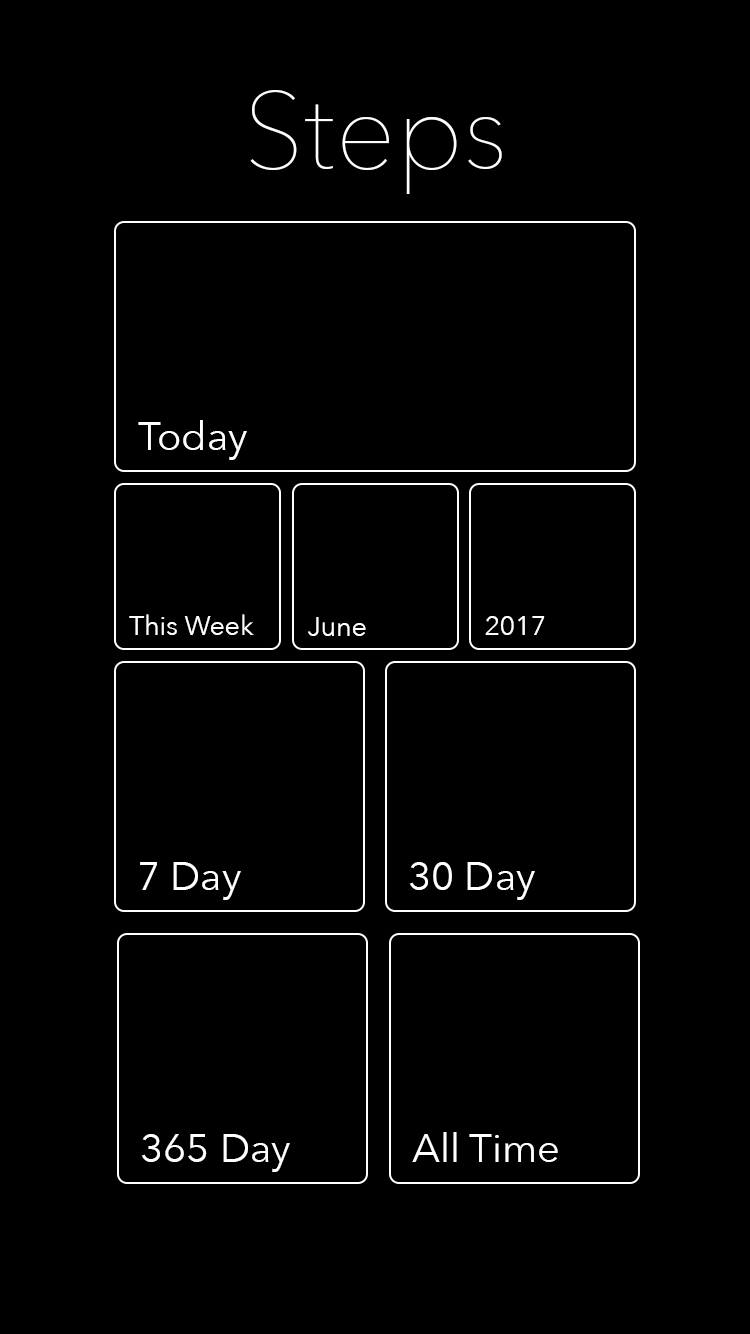
<style>
.page{position:relative;width:750px;height:1334px;background:#000000}
.page>*{position:absolute;margin:0}
.t1{font:107.1px "AvenirNext-UltraLight";color:#ffffff}
.t2{font:40px "AvenirNext-Regular";color:#ffffff}
.t3{font:26.7px "AvenirNext-Regular";color:#ffffff}
.t4{font:26.6px "AvenirNext-Regular";color:#ffffff}
</style>
<div class="page">
<p class="t1" style="left:250px;top:90px;width:252px;height:104px">Steps</p>
<p class="t2" style="left:138px;top:420px;width:109px;height:40px">Today</p>
<p class="t3" style="left:129px;top:614px;width:125px;height:21px">This Week</p>
<p class="t3" style="left:308px;top:617px;width:58px;height:19px">June</p>
<p class="t4" style="left:485px;top:616px;width:60px;height:19px">2017</p>
<p class="t2" style="left:140px;top:862px;width:101px;height:38px">7 Day</p>
<p class="t2" style="left:409px;top:862px;width:126px;height:38px">30 Day</p>
<p class="t2" style="left:141px;top:1134px;width:149px;height:38px">365 Day</p>
<p class="t2" style="left:412px;top:1132px;width:146px;height:30px">All Time</p>
</div>
